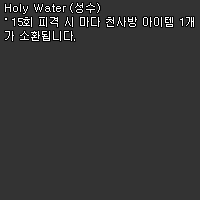
<style>
.page{position:relative;width:200px;height:200px;background:#333333}
.page>*{position:absolute;margin:0}
.t1{font:11px/14px "Dotum";color:#ffffff}
</style>
<div class="page">
<p class="t1" style="left:5px;top:3px;width:189px;height:38px">Holy Water (성수)<br>˚ 15회 피격 시 마다 천사방 아이템 1개<br>가 소환됩니다.</p>
</div>
